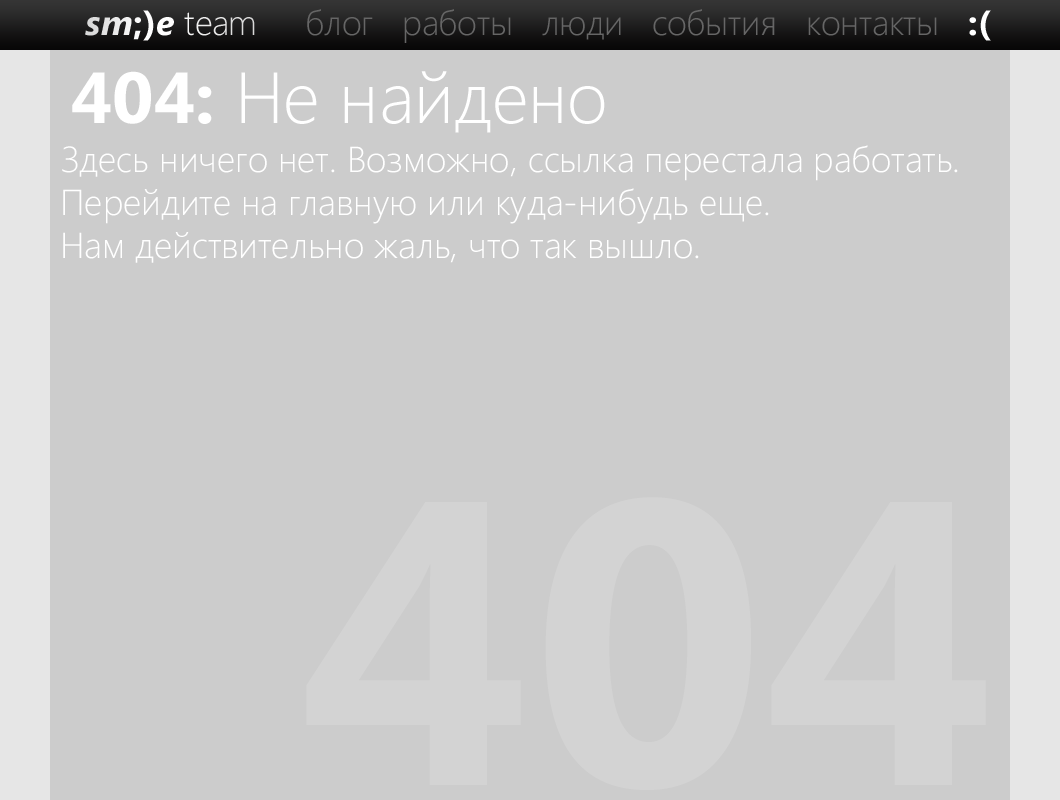
<style>
.page{position:relative;width:1060px;height:800px;background:#cccccc}
.page>*{position:absolute;margin:0}
.t1{font:35px "SegoeUI-Light";letter-spacing:-0.02em;color:#ffffff}
.t2{font:35px "SegoeUI-BoldItalic";color:#ffffff}
.t3{font:35px "SegoeUI-BoldItalic";letter-spacing:0.02em;color:#ffffff}
.t4{font:35px "SegoeUI-Bold";letter-spacing:0.02em;color:#ffffff}
.t5{font:35px "SegoeUI-Bold";color:#ffffff}
.t6{font:35px "SegoeUI-Light";letter-spacing:0.01em;color:#ffffff}
.t7{font:35px "SegoeUI-Light";letter-spacing:-0.05em;color:#ffffff}
.t8{font:35px "SegoeUI-Light";color:#666666}
.t9{font:35px "SegoeUI-Light";letter-spacing:-0.035em;color:#666666}
.t10{font:35px "SegoeUI-Light";letter-spacing:0.01em;color:#666666}
.t11{font:35px "SegoeUI-Light";letter-spacing:-0.02em;color:#666666}
.t12{font:72px "SegoeUI-Light";color:#ffffff}
.t13{font:72px "SegoeUI-Bold";color:#ffffff}
.t14{font:36px "SegoeUI-Light";color:#ffffff}
.t15{font:404px "SegoeUI-Bold";color:#d3d3d3}
</style>
<div class="page">
<p class="t1" style="left:85px;top:10px;width:170px;height:31px"><span class="t2">s</span><span class="t3">m</span><span class="t4">;</span><span class="t5">)</span><span class="t2">e </span><span class="t6">t</span>ea<span class="t7">m</span></p>
<p class="t8" style="left:307px;top:9px;width:684px;height:34px">блог   р<span class="t9">а</span><span class="t10">бо</span>ты   л<span class="t11">юд</span>и   с<span class="t11">об</span>ытия   конт<span class="t11">ак</span>ты   <span class="t5">:(</span></p>
<p class="t12" style="left:72px;top:71px;width:533px;height:62px"><span class="t13">404: </span>Не найдено</p>
<p class="t14" style="left:62px;top:145px;width:896px;height:118px">Здесь ничего нет. Возможно, ссылка перестала работать.<br>Перейдите на главную или куда-нибудь еще.<br>Нам действительно жаль, что так вышло.</p>
<p class="t15" style="left:306px;top:497px;width:680px;height:293px">404</p>
</div>
